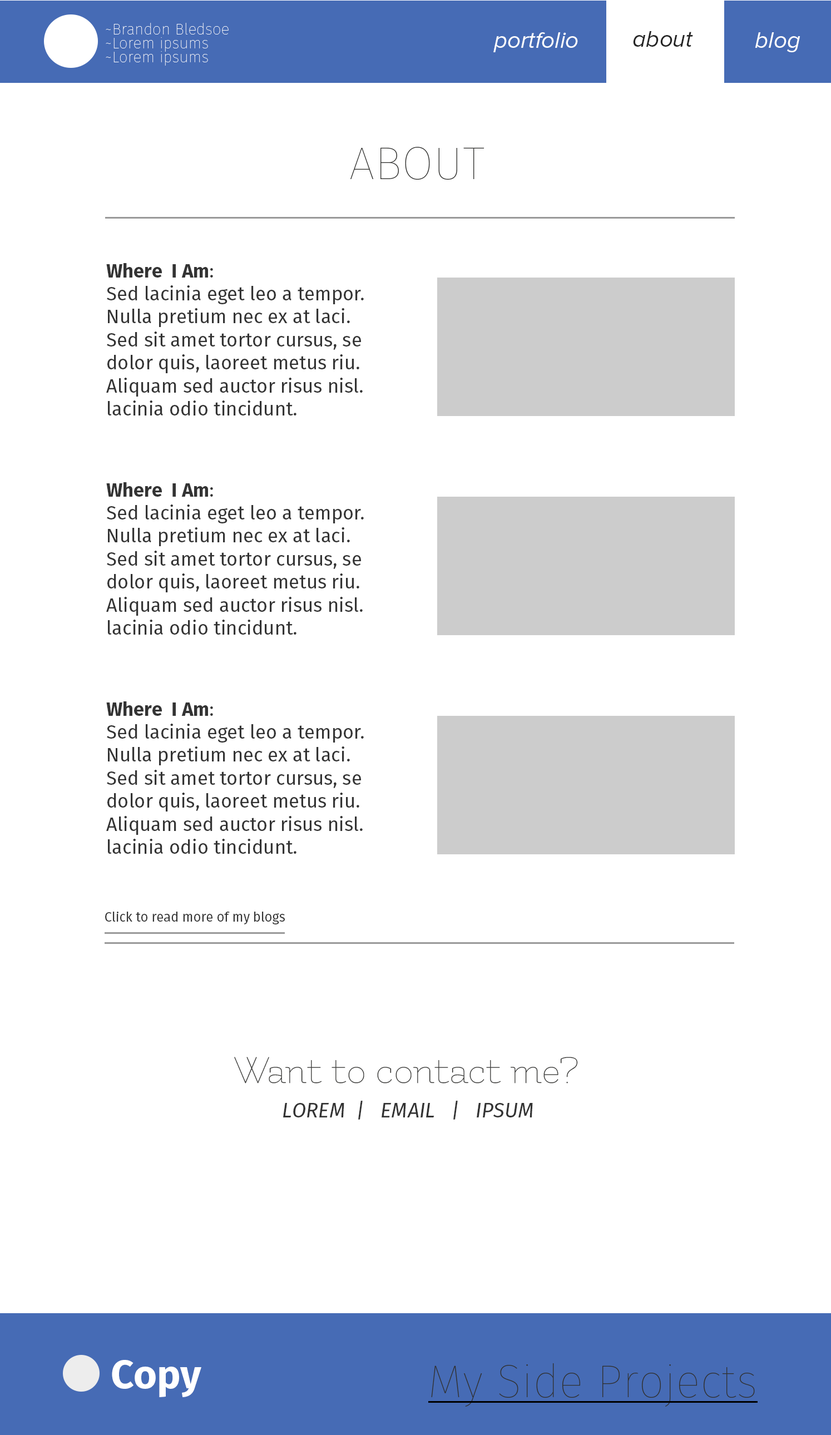
<style>
.page{position:relative;width:831px;height:1435px;background:#ffffff}
.page>*{position:absolute;margin:0}
.t1{font:15.6px "FiraSans-Hair";color:#ffffff}
.t2{font:23.3px "ProximaNova-RegularIt";color:#ffffff}
.t3{font:23.3px "ProximaNova-RegularIt";color:#252525}
.t4{font:45.9px "FiraSans-Hair";color:#31312f}
.t5{font:3.2px "MyriadPro-Regular";color:#333333}
.t6{font:3.2px "FiraSans-Bold";color:#333333}
.t7{font:13.1px "FiraSans-Regular";color:#333333}
.t8{font:42.3px "Flamenco-Light";color:#31312f}
.t9{font:20.6px "FiraSans-Italic";color:#333333}
.t10{font:40px "FiraSans-Bold";color:#ffffff}
</style>
<div class="page">
<p class="t1" style="left:106px;top:23px;width:123px;height:11px">~Brandon Bledsoe</p>
<p class="t1" style="left:106px;top:37px;width:102px;height:15px">~Lorem ipsums</p>
<p class="t2" style="left:493px;top:32px;width:85px;height:20px">portfolio</p>
<p class="t3" style="left:633px;top:31px;width:60px;height:16px">about</p>
<p class="t2" style="left:755px;top:32px;width:45px;height:20px">blog</p>
<p class="t1" style="left:106px;top:51px;width:102px;height:15px">~Lorem ipsums</p>
<p class="t4" style="left:350px;top:147px;width:134px;height:33px">ABOUT</p>
<p class="t5" style="left:106px;top:263px;width:258px;height:152px"><span class="t6">Where  I Am</span>:<br>Sed lacinia eget leo a tempor. <br>Nulla pretium nec ex at laci. <br>Sed sit amet tortor cursus, se <br>dolor quis, laoreet metus riu. <br>Aliquam sed auctor risus nisl.  <br>lacinia odio tincidunt.</p>
<p class="t5" style="left:106px;top:482px;width:258px;height:153px"><span class="t6">Where  I Am</span>:<br>Sed lacinia eget leo a tempor. <br>Nulla pretium nec ex at laci. <br>Sed sit amet tortor cursus, se <br>dolor quis, laoreet metus riu. <br>Aliquam sed auctor risus nisl.  <br>lacinia odio tincidunt.</p>
<p class="t5" style="left:106px;top:701px;width:258px;height:153px"><span class="t6">Where  I Am</span>:<br>Sed lacinia eget leo a tempor. <br>Nulla pretium nec ex at laci. <br>Sed sit amet tortor cursus, se <br>dolor quis, laoreet metus riu. <br>Aliquam sed auctor risus nisl.  <br>lacinia odio tincidunt.</p>
<p class="t7" style="left:105px;top:912px;width:180px;height:12px">Click to read more of my blogs</p>
<p class="t8" style="left:234px;top:1057px;width:344px;height:26px">Want to contact me?</p>
<p class="t9" style="left:283px;top:1101px;width:250px;height:19px">LOREM  |   EMAIL   |   IPSUM</p>
<p class="t10" style="left:112px;top:1360px;width:89px;height:37px">Copy</p>
<p class="t4" style="left:431px;top:1363px;width:324px;height:44px">My Side Projects</p>
</div>
